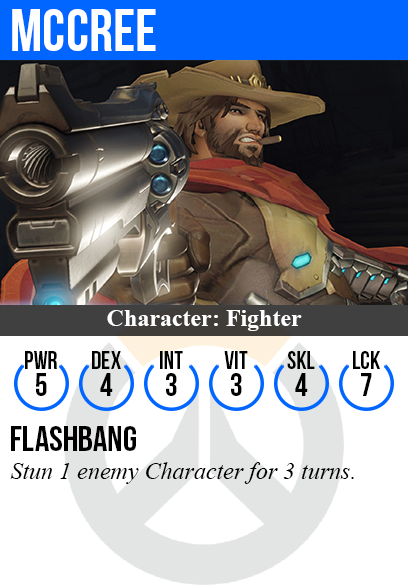
<style>
.page{position:relative;width:408px;height:585px;background:#ffffff}
.page>*{position:absolute;margin:0}
.t1{font:60px "BebasNeue";color:#ffffff}
.t2{font:24px "TimesNewRomanPS-BoldMT";color:#ffffff}
.t3{font:25px "BebasNeue";color:#000000}
.t4{font:32px "BebasNeue";color:#000000}
.t5{font:36px "BebasNeue";color:#000000}
.t6{font:24px "TimesNewRomanPS-ItalicMT";color:#000000}
</style>
<div class="page">
<p class="t1" style="left:12px;top:9px;width:144px;height:42px">mccree</p>
<p class="t2" style="left:107px;top:310px;width:195px;height:21px">Character: Fighter</p>
<p class="t3" style="left:25px;top:351px;width:32px;height:18px">PWR</p>
<p class="t3" style="left:92px;top:351px;width:29px;height:18px">dex</p>
<p class="t3" style="left:160px;top:351px;width:23px;height:18px">int</p>
<p class="t3" style="left:224px;top:351px;width:24px;height:18px">vit</p>
<p class="t3" style="left:287px;top:351px;width:28px;height:18px">skl</p>
<p class="t3" style="left:353px;top:351px;width:27px;height:18px">lck</p>
<p class="t4" style="left:36px;top:373px;width:11px;height:23px">5</p>
<p class="t4" style="left:100px;top:373px;width:13px;height:23px">4</p>
<p class="t4" style="left:166px;top:373px;width:11px;height:23px">3</p>
<p class="t4" style="left:231px;top:373px;width:11px;height:23px">3</p>
<p class="t4" style="left:295px;top:373px;width:13px;height:23px">4</p>
<p class="t4" style="left:361px;top:373px;width:11px;height:23px">7</p>
<p class="t5" style="left:11px;top:426px;width:125px;height:25px">flashbang</p>
<p class="t6" style="left:10px;top:462px;width:344px;height:22px">Stun 1 enemy Character for 3 turns.</p>
</div>
